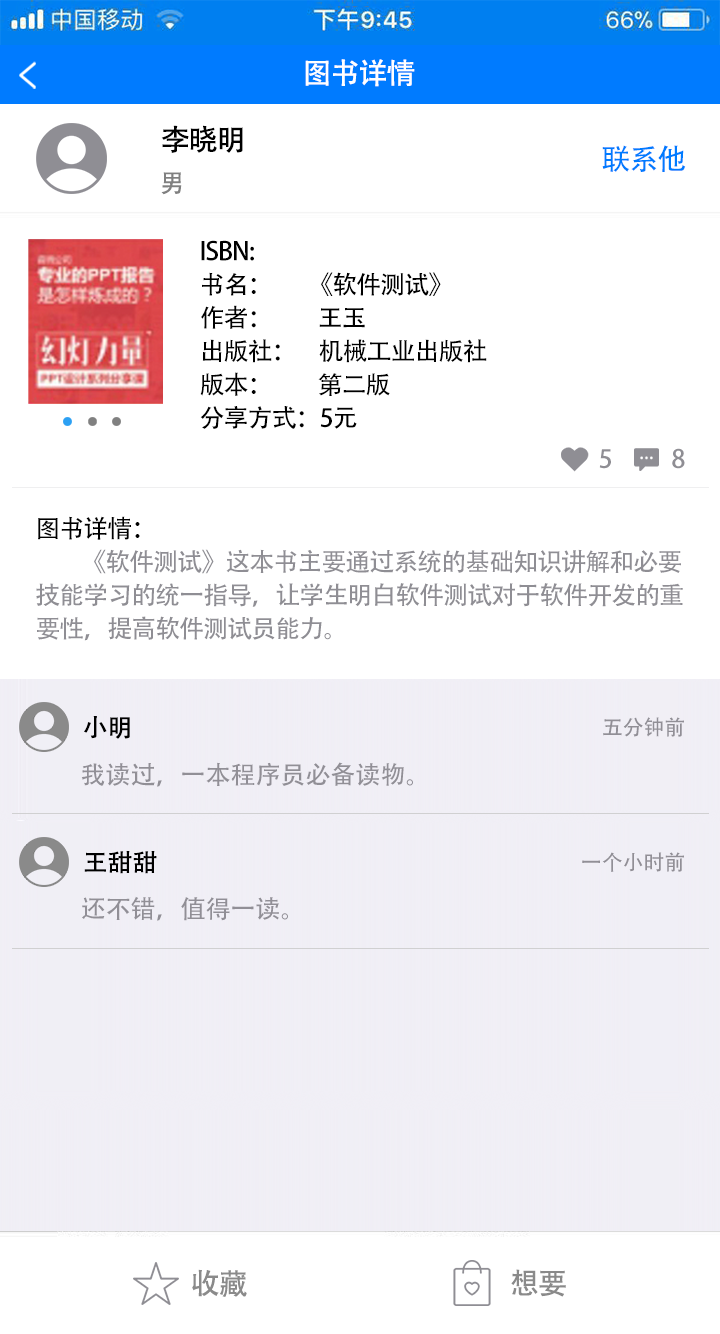
<style>
.page{position:relative;width:720px;height:1334px;background:#ffffff}
.page>*{position:absolute;margin:0}
.t1{font:29.2px "AdobeHeitiStd-Regular";letter-spacing:-0.04em;color:#ffffff}
.t2{font:29.2px "AdobeHeitiStd-Regular";letter-spacing:-0.04em;color:#000000}
.t3{font:29.2px "AdobeHeitiStd-Regular";letter-spacing:-0.04em;color:#007bff}
.t4{font:25px "AdobeHeitiStd-Regular";letter-spacing:-0.04em;color:#808080}
.t5{font:25px/33.3px "AdobeHeitiStd-Regular";letter-spacing:-0.04em;color:#000000}
.t6{font:25px "AdobeHeitiStd-Regular";letter-spacing:-0.04em;color:#8f8e94}
.t7{font:25px/33.3px "AdobeHeitiStd-Regular";letter-spacing:-0.04em;color:#8f8e94}
.t8{font:25px "AdobeHeitiStd-Regular";color:#000000}
.t9{font:20.8px "AdobeHeitiStd-Regular";color:#918f96}
.t10{font:25px "AdobeHeitiStd-Regular";color:#918f96}
.t11{font:29.2px "AdobeHeitiStd-Regular";letter-spacing:-0.04em;color:#8a8a8a}
</style>
<div class="page">
<p class="t1" style="left:305px;top:59px;width:110px;height:28px">图书详情</p>
<p class="t2" style="left:161px;top:125px;width:82px;height:28px">李晓明</p>
<p class="t3" style="left:602px;top:145px;width:84px;height:27px">联系他</p>
<p class="t4" style="left:161px;top:172px;width:21px;height:23px">男</p>
<p class="t5" style="left:200px;top:240px;width:287px;height:189px">ISBN:<br>书名：        《软件测试》<br>作者：          王玉<br>出版社：     机械工业出版社<br>版本：          第二版<br>分享方式：5元</p>
<p class="t6" style="left:599px;top:448px;width:86px;height:21px">5             8</p>
<p class="t7" style="left:36px;top:516px;width:647px;height:125px"><span class="t5">图书详情：<br>          </span>《软件测试》这本书主要通过系统的基础知识讲解和必要<br>技能学习的统一指导，让学生明白软件测试对于软件开发的重<br>要性，提高软件测试员能力。</p>
<p class="t8" style="left:84px;top:716px;width:46px;height:23px">小明</p>
<p class="t9" style="left:603px;top:717px;width:81px;height:20px">五分钟前</p>
<p class="t10" style="left:81px;top:762px;width:332px;height:25px">我读过，一本程序员必备读物。</p>
<p class="t8" style="left:84px;top:851px;width:73px;height:23px">王甜甜</p>
<p class="t9" style="left:582px;top:852px;width:102px;height:20px">一个小时前</p>
<p class="t10" style="left:82px;top:896px;width:206px;height:25px">还不错，值得一读。</p>
<p class="t11" style="left:192px;top:1269px;width:374px;height:28px">收藏                                                 想要</p>
</div>
